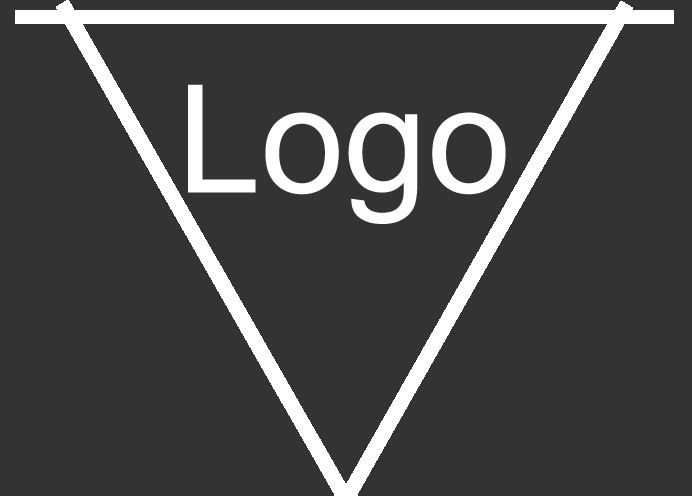
<style>
.page{position:relative;width:692px;height:496px;background:#333333}
.page>*{position:absolute;margin:0}
.t1{font:150px "ArialMT";color:#ffffff}
</style>
<div class="page">
<p class="t1" style="left:188px;top:84px;width:318px;height:140px">Logo</p>
</div>
